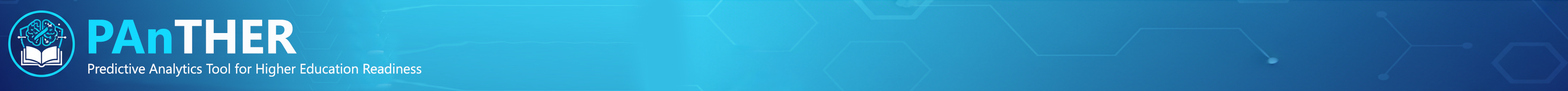
<style>
.page{position:relative;width:1568px;height:91px}
.page>*{position:absolute;margin:0}
.t1{font:47.9px "SegoeUI-Bold";color:#fbfcfd}
.t2{font:47.9px "SegoeUI-Bold";color:#13d9ff}
.t3{font:13.6px "SegoeUIHistoric";color:#fbfcfd}
</style>
<div class="page">
<p class="t1" style="left:89px;top:20px;width:208px;height:34px"><span class="t2">PAn</span>THER</p>
<p class="t3" style="left:88px;top:63px;width:333px;height:14px">Predictive Analytics Tool for Higher Education Readiness</p>
</div>
